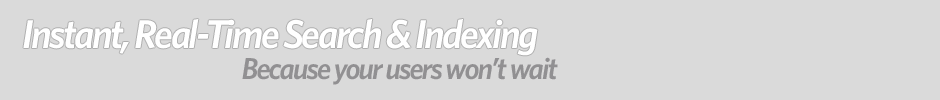
<style>
.page{position:relative;width:940px;height:100px;background:#dadada}
.page>*{position:absolute;margin:0}
.t1{font:40.3px "Whitney-SemiboldItalic";letter-spacing:-0.06em;color:#ffffff}
.t2{font:30.3px "Whitney-SemiboldItalic";letter-spacing:-0.06em;color:#919092}
</style>
<div class="page">
<p class="t1" style="left:23px;top:19px;width:515px;height:37px">Instant, Real-Time Search &amp; Indexing</p>
<p class="t2" style="left:242px;top:57px;width:316px;height:28px">Because your users won’t wait</p>
</div>
